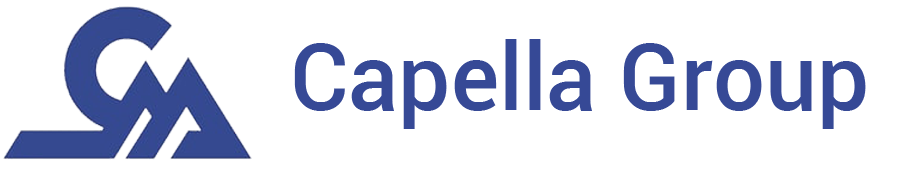
<style>
.page{position:relative;width:914px;height:169px;background:#ffffff}
.page>*{position:absolute;margin:0}
.t1{font:92.3px "Roboto-Medium";color:#364996}
</style>
<div class="page">
<p class="t1" style="left:294px;top:39px;width:572px;height:90px">Capella Group</p>
</div>
